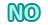
<style>
.page{position:relative;width:48px;height:25px;background:#ffffff}
.page>*{position:absolute;margin:0}
.t1{font:24px "Calibri-Bold";color:#9effec}
</style>
<div class="page">
<p class="t1" style="left:9px;top:5px;width:30px;height:15px">NO</p>
</div>
